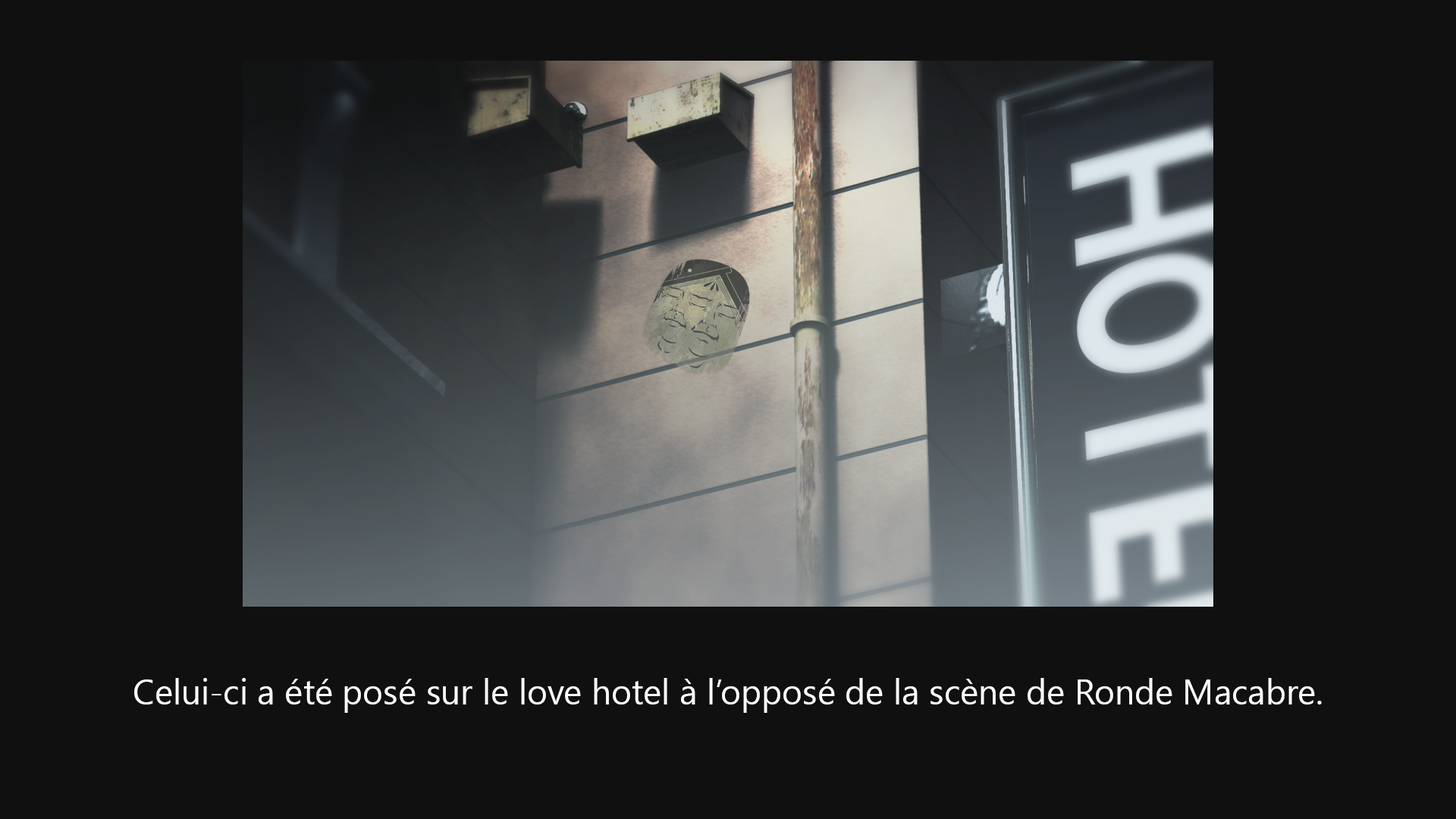
<style>
.page{position:relative;width:1456px;height:819px;background:#101010}
.page>*{position:absolute;margin:0}
.t1{font:34.9px "SegoeUIHistoric";color:#ffffff}
</style>
<div class="page">
<p class="t1" style="left:134px;top:678px;width:1188px;height:35px">Celui-ci a été posé sur le love hotel à l’opposé de la scène de Ronde Macabre.</p>
</div>
